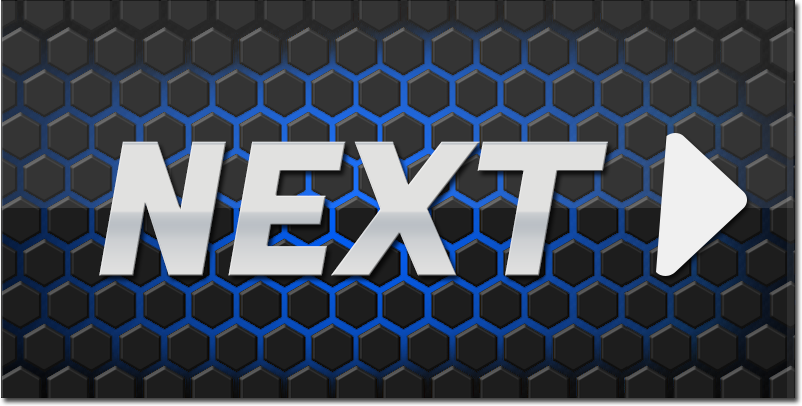
<style>
.page{position:relative;width:802px;height:406px;background:#343434}
.page>*{position:absolute;margin:0}
.t1{font:185.2px "FugazOne-Regular";color:#dfdfdf}
</style>
<div class="page">
<p class="t1" style="left:99px;top:141px;width:509px;height:135px">NEXT</p>
</div>
